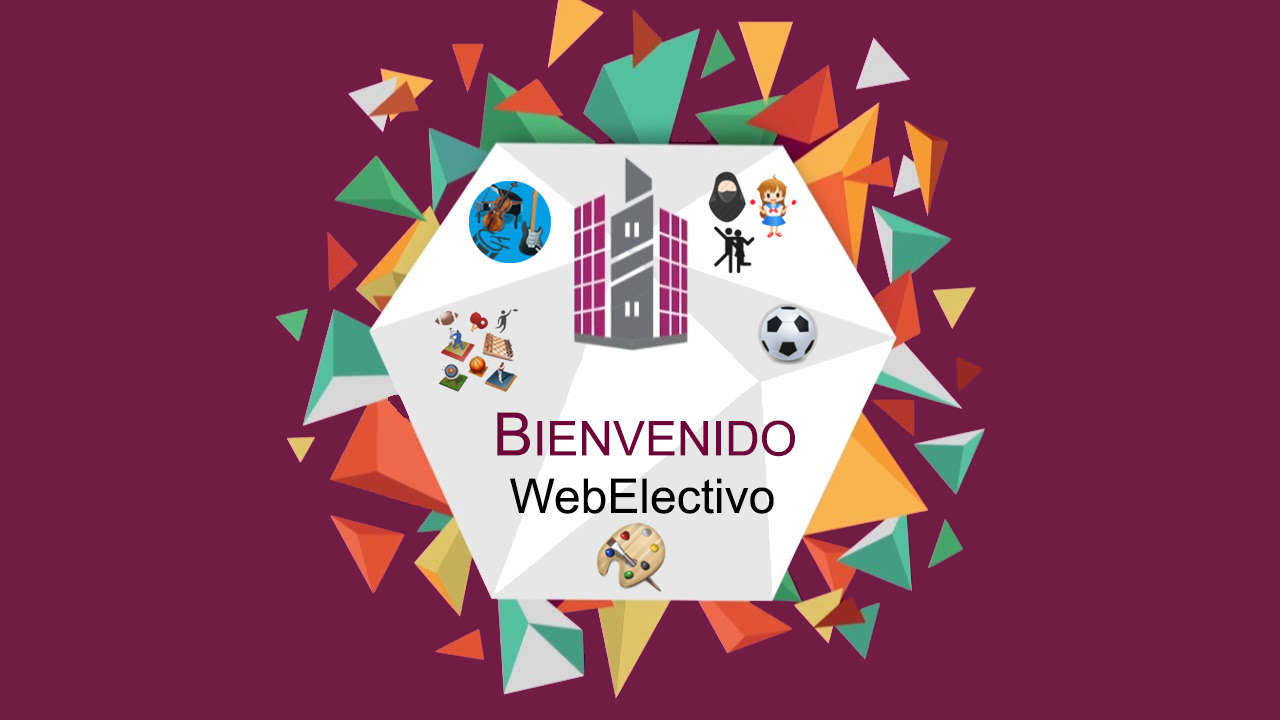
<style>
.page{position:relative;width:1280px;height:720px;background:#711c45}
.page>*{position:absolute;margin:0}
.t1{font:48px "ArialMT";color:#6e0339}
.t2{font:60px "ArialMT";color:#6e0339}
.t3{font:48px "ArialMT";color:#000000}
</style>
<div class="page">
<p class="t1" style="left:497px;top:412px;width:298px;height:45px"><span class="t2">B</span>IENVENIDO</p>
<p class="t3" style="left:510px;top:478px;width:264px;height:36px">WebElectivo</p>
</div>
